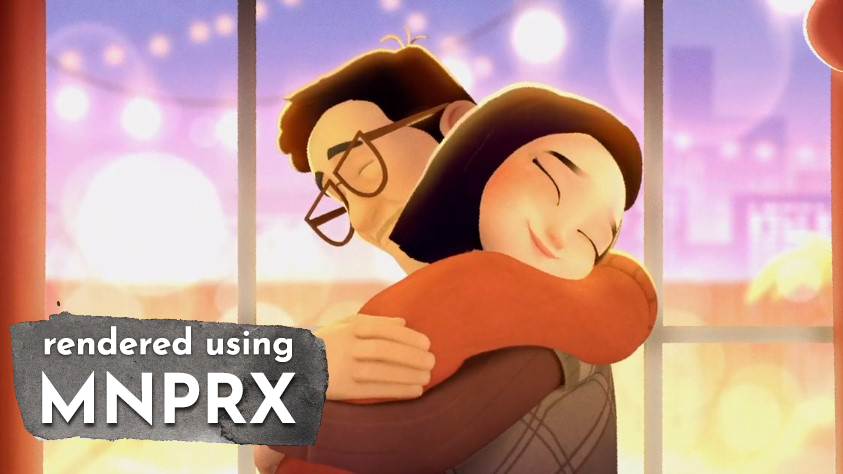
<style>
.page{position:relative;width:843px;height:474px}
.page>*{position:absolute;margin:0}
.t1{font:35.3px "JosefinSans-Bold";color:#ffffff}
.t2{font:67.9px "JosefinSans-Bold";color:#ffffff}
</style>
<div class="page">
<p class="t1" style="left:44px;top:326px;width:248px;height:36px">rendered using</p>
<p class="t2" style="left:42px;top:370px;width:254px;height:56px">MNPRX</p>
</div>
